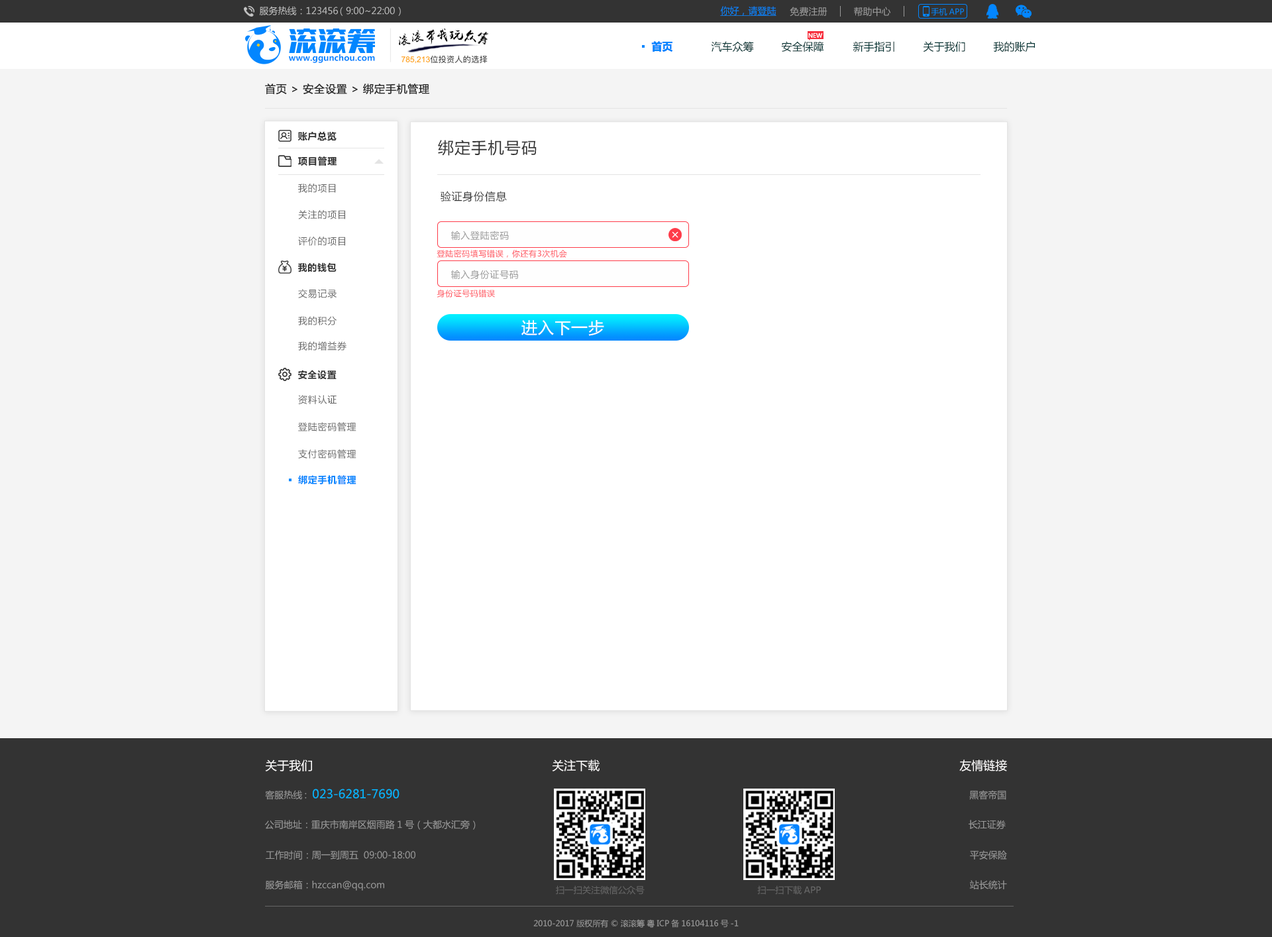
<style>
.page{position:relative;width:1272px;height:937px;background:#ffffff}
.page>*{position:absolute;margin:0}
.t1{font:9.3px "MicrosoftYaHei";color:#c4c4c4}
.t2{font:9.3px "MicrosoftYaHei";color:#0386ff;text-decoration:underline}
.t3{font:9.3px "MicrosoftYaHei";color:#999999}
.t4{font:8px "MicrosoftYaHei";color:#0386ff}
.t5{font:10.6px "MicrosoftYaHei-Bold";color:#0386ff}
.t6{font:10.6px "MicrosoftYaHei";color:#033333}
.t7{font:6px "MicrosoftYaHei";color:#ffffff}
.t8{font:8.3px "MicrosoftYaHei-Bold";color:#0386ff}
.t9{font:10.6px "MicrosoftYaHei";letter-spacing:0.05em;color:#333333}
.t10{font:9.3px "MicrosoftYaHei-Bold";letter-spacing:0.05em;color:#333333}
.t11{font:15.9px "MicrosoftYaHei";letter-spacing:0.05em;color:#333333}
.t12{font:9.3px "MicrosoftYaHei";letter-spacing:0.05em;color:#666666}
.t13{font:9.3px "MicrosoftYaHei";letter-spacing:0.05em;color:#999999}
.t14{font:8px "MicrosoftYaHei";letter-spacing:0.05em;color:#ff4b57}
.t15{font:15.9px "MicrosoftYaHei";letter-spacing:0.05em;color:#ffffff}
.t16{font:9.3px "MicrosoftYaHei-Bold";letter-spacing:0.05em;color:#0386ff}
.t17{font:11.9px "MicrosoftYaHei";color:#fffefe}
.t18{font:11.9px "MicrosoftYaHei";color:#03b6ff}
.t19{font:8.9px "MicrosoftYaHei";color:#666666}
.t20{font:8px "MicrosoftYaHei";color:#999999}
</style>
<div class="page">
<p class="t1" style="left:259px;top:6px;width:142px;height:10px">服务热线：123456 （9:00~22:00）</p>
<p class="t2" style="left:720px;top:6px;width:57px;height:10px">你好，请登陆</p>
<p class="t3" style="left:790px;top:7px;width:38px;height:10px">免费注册</p>
<p class="t3" style="left:854px;top:7px;width:37px;height:10px">帮助中心</p>
<p class="t4" style="left:931px;top:8px;width:33px;height:8px">手机APP</p>
<p class="t5" style="left:651px;top:41px;width:22px;height:11px">首页</p>
<p class="t6" style="left:711px;top:41px;width:43px;height:11px">汽车众筹</p>
<p class="t6" style="left:781px;top:41px;width:43px;height:11px">安全保障</p>
<p class="t7" style="left:809px;top:32px;width:14px;height:6px">NEW</p>
<p class="t6" style="left:853px;top:41px;width:42px;height:11px">新手指引</p>
<p class="t6" style="left:923px;top:41px;width:43px;height:11px">关于我们</p>
<p class="t6" style="left:993px;top:41px;width:42px;height:11px">我的账户</p>
<p class="t8" style="left:289px;top:54px;width:86px;height:9px">www.ggunchou.com</p>
<p class="t9" style="left:265px;top:84px;width:164px;height:11px">首页 &gt; 安全设置 &gt; 绑定手机管理</p>
<p class="t10" style="left:298px;top:131px;width:39px;height:10px">账户总览</p>
<p class="t11" style="left:438px;top:140px;width:99px;height:16px">绑定手机号码</p>
<p class="t10" style="left:298px;top:156px;width:39px;height:10px">项目管理</p>
<p class="t12" style="left:298px;top:184px;width:38px;height:9px">我的项目</p>
<p class="t9" style="left:441px;top:191px;width:66px;height:11px">验证身份信息</p>
<p class="t12" style="left:298px;top:210px;width:47px;height:9px">关注的项目</p>
<p class="t13" style="left:451px;top:231px;width:58px;height:10px">输入登陆密码</p>
<p class="t12" style="left:298px;top:237px;width:47px;height:9px">评价的项目</p>
<p class="t14" style="left:437px;top:250px;width:130px;height:8px">登陆密码填写错误，你还有3次机会</p>
<p class="t10" style="left:298px;top:262px;width:39px;height:10px">我的钱包</p>
<p class="t13" style="left:451px;top:270px;width:67px;height:10px">输入身份证号码</p>
<p class="t12" style="left:298px;top:289px;width:39px;height:9px">交易记录</p>
<p class="t14" style="left:437px;top:290px;width:58px;height:8px">身份证号码错误</p>
<p class="t12" style="left:298px;top:316px;width:39px;height:9px">我的积分</p>
<p class="t15" style="left:522px;top:320px;width:82px;height:16px">进入下一步</p>
<p class="t12" style="left:298px;top:341px;width:49px;height:10px">我的增益券</p>
<p class="t10" style="left:298px;top:370px;width:39px;height:10px">安全设置</p>
<p class="t12" style="left:298px;top:395px;width:39px;height:9px">资料认证</p>
<p class="t12" style="left:298px;top:422px;width:59px;height:9px">登陆密码管理</p>
<p class="t12" style="left:298px;top:449px;width:59px;height:10px">支付密码管理</p>
<p class="t16" style="left:298px;top:475px;width:59px;height:9px">绑定手机管理</p>
<p class="t17" style="left:265px;top:759px;width:47px;height:12px">关于我们</p>
<p class="t17" style="left:552px;top:759px;width:48px;height:12px">关注下载</p>
<p class="t17" style="left:960px;top:759px;width:47px;height:12px">友情链接</p>
<p class="t18" style="left:265px;top:789px;width:135px;height:11px"><span class="t3">客服热线:  </span>023-6281-7690</p>
<p class="t3" style="left:970px;top:790px;width:37px;height:10px">黑客帝国</p>
<p class="t3" style="left:265px;top:820px;width:211px;height:10px">公司地址：重庆市南岸区烟雨路1号（大都水汇旁）</p>
<p class="t3" style="left:969px;top:820px;width:37px;height:10px">长江证券</p>
<p class="t3" style="left:266px;top:850px;width:150px;height:10px">工作时间：周一到周五  09:00-18:00</p>
<p class="t3" style="left:970px;top:850px;width:37px;height:10px">平安保险</p>
<p class="t3" style="left:265px;top:880px;width:119px;height:11px">服务邮箱：hzccan@qq.com</p>
<p class="t3" style="left:970px;top:880px;width:37px;height:9px">站长统计</p>
<p class="t19" style="left:556px;top:885px;width:89px;height:10px">扫一扫关注微信公众号</p>
<p class="t19" style="left:758px;top:885px;width:63px;height:10px">扫一扫下载APP</p>
<p class="t20" style="left:534px;top:919px;width:205px;height:9px">2010-2017 版权所有 © 滚滚筹 粤ICP备16104116号-1</p>
</div>
